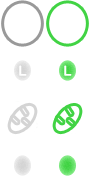
<style>
.page{position:relative;width:90px;height:191px;background:#ffffff}
.page>*{position:absolute;margin:0}
.t1{font:14px "ArialRoundedMTBold";color:#ffffff;font-variant:small-caps}
</style>
<div class="page">
<p class="t1" style="left:19px;top:65px;width:8px;height:11px">L</p>
<p class="t1" style="left:64px;top:65px;width:8px;height:11px">L</p>
</div>
